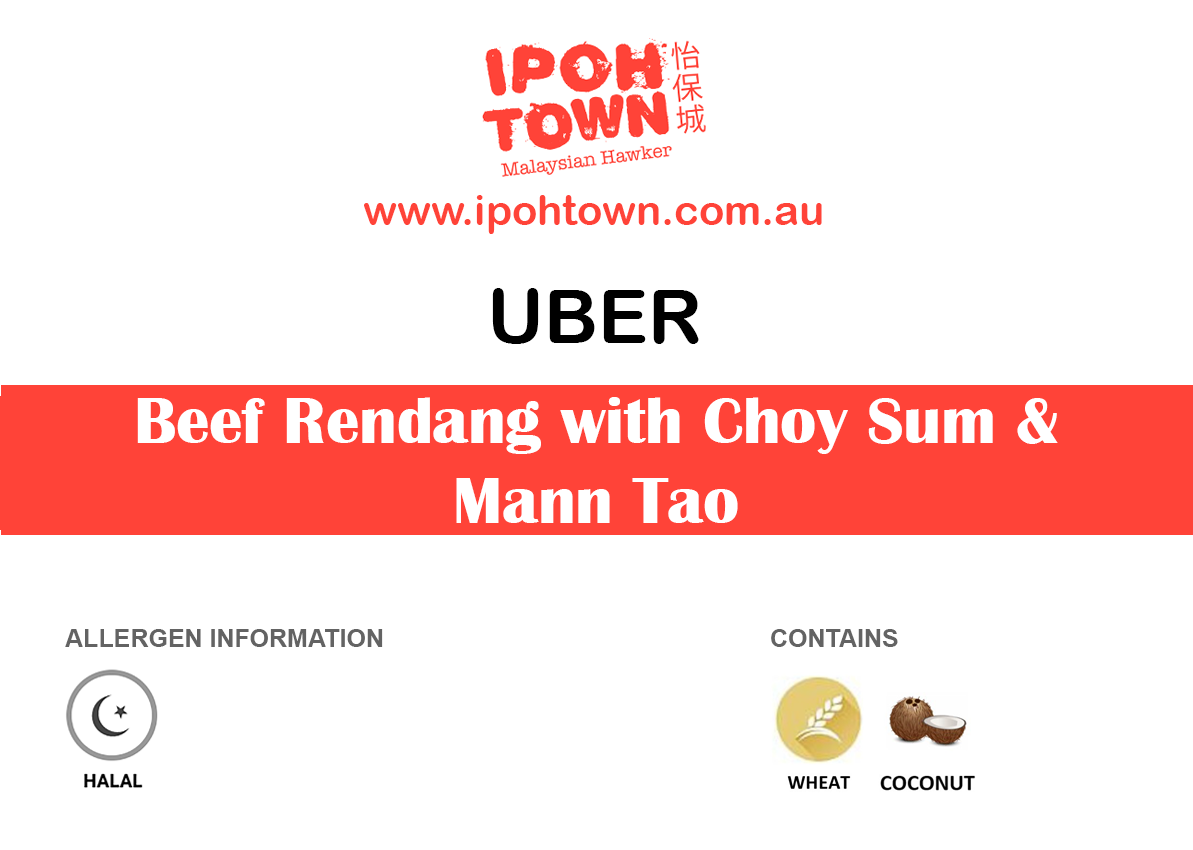
<style>
.page{position:relative;width:1193px;height:850px;background:#ffffff}
.page>*{position:absolute;margin:0}
.t1{font:41.7px "ArialRoundedMTBold";color:#ff4338}
.t2{font:75px "ArialRoundedMTBold";color:#000000}
.t3{font:66.7px "BritannicBold";color:#ffffff}
.t4{font:25px "Arial-BoldMT";color:#636363}
</style>
<div class="page">
<p class="t1" style="left:364px;top:195px;width:458px;height:39px">www.ipohtown.com.au</p>
<p class="t2" style="left:492px;top:288px;width:207px;height:56px">UBER</p>
<p class="t3" style="left:137px;top:397px;width:921px;height:126px;text-align:center">Beef Rendang with Choy Sum &amp; Mann Tao</p>
<p class="t4" style="left:65px;top:629px;width:318px;height:18px">ALLERGEN INFORMATION</p>
<p class="t4" style="left:771px;top:629px;width:127px;height:18px">CONTAINS</p>
</div>
